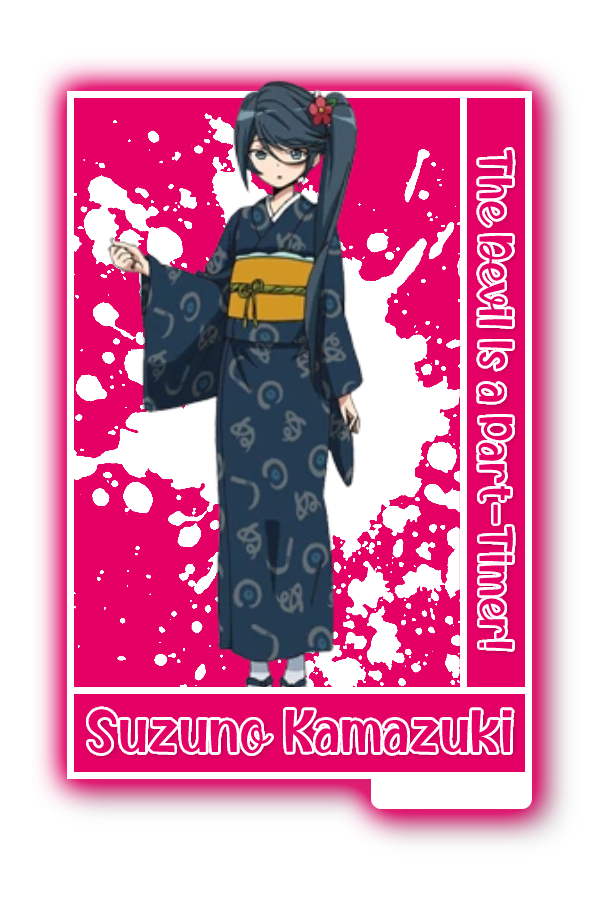
<style>
.page{position:relative;width:600px;height:900px;background:#ffffff}
.page>*{position:absolute;margin:0}
.t1{font:48.8px "ButterFood";color:#e50065}
.t2{font:62.2px "ButterFood";color:#e50065}
</style>
<div class="page">
<p class="t1" style="left:478px;top:149px;width:37px;height:500px;rotate:90deg">The Devil Is a Part-Timer!</p>
<p class="t2" style="left:88px;top:709px;width:424px;height:45px">Suzuno Kamazuki</p>
</div>
